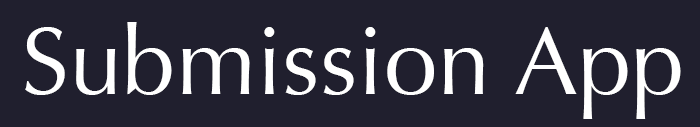
<style>
.page{position:relative;width:700px;height:127px;background:#201f2e}
.page>*{position:absolute;margin:0}
.t1{font:96px "Optima-Regular";color:#ffffff}
</style>
<div class="page">
<p class="t1" style="left:25px;top:22px;width:656px;height:97px">Submission App</p>
</div>
